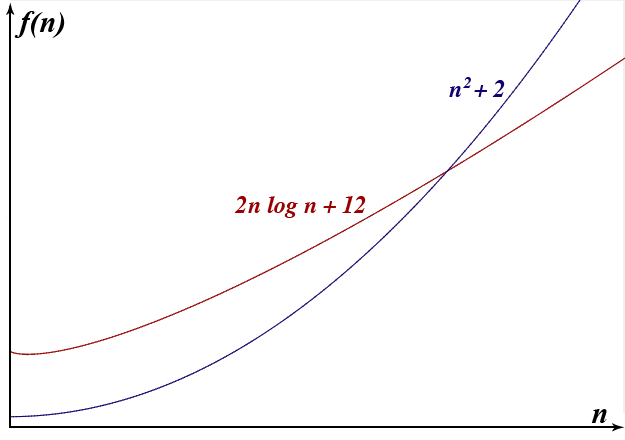
<style>
.page{position:relative;width:625px;height:440px;background:#ffffff}
.page>*{position:absolute;margin:0}
.t1{font:30px "TimesNewRomanPS-BoldItalicMT";color:#000000}
.t2{font:16px "Times-BoldItalic";color:#160071}
.t3{font:24px "Times-BoldItalic";color:#160071}
.t4{font:24px "Times-BoldItalic";color:#990000}
</style>
<div class="page">
<p class="t1" style="left:14px;top:11px;width:51px;height:27px">f(n)</p>
<p class="t2" style="left:463px;top:77px;width:8px;height:11px">2</p>
<p class="t3" style="left:449px;top:80px;width:56px;height:17px">n  + 2</p>
<p class="t4" style="left:234px;top:196px;width:132px;height:22px">2n log n + 12</p>
<p class="t1" style="left:591px;top:409px;width:16px;height:14px">n</p>
</div>
